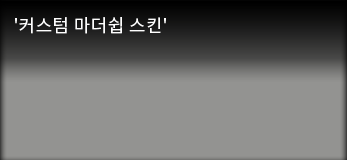
<style>
.page{position:relative;width:347px;height:160px;background:#939391}
.page>*{position:absolute;margin:0}
.t1{font:17.9px "NotoSansCJKkr-Regular";letter-spacing:0.025em;color:#fefefe}
</style>
<div class="page">
<p class="t1" style="left:15px;top:17px;width:151px;height:17px">'커스텀 마더쉽 스킨'</p>
</div>
